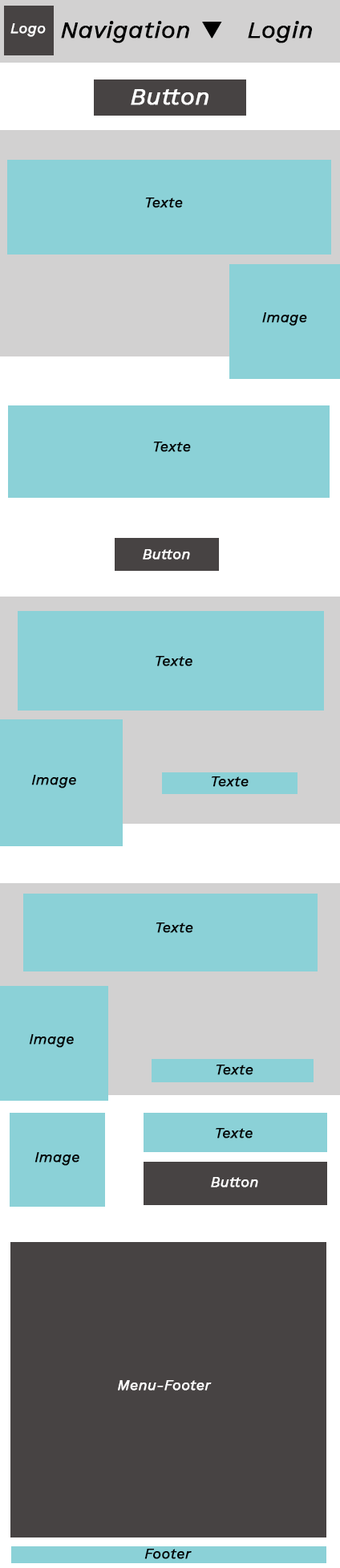
<style>
.page{position:relative;width:340px;height:1568px;background:#8bd1d7}
.page>*{position:absolute;margin:0}
.t1{font:14.5px "WorkSans-Italic";color:#ffffff;font-weight:bold}
.t2{font:24.1px "WorkSans-Italic";color:#000000;font-weight:bold}
.t3{font:24.1px "WorkSans-Italic";color:#ffffff;font-weight:bold}
.t4{font:14.5px "WorkSans-Italic";color:#000000;font-weight:bold}
</style>
<div class="page">
<p class="t1" style="left:10px;top:23px;width:36px;height:14px">Logo</p>
<p class="t2" style="left:61px;top:21px;width:161px;height:22px">Navigation ▼</p>
<p class="t2" style="left:248px;top:21px;width:64px;height:22px">Login</p>
<p class="t3" style="left:131px;top:89px;width:78px;height:16px">Button</p>
<p class="t4" style="left:145px;top:198px;width:38px;height:10px">Texte</p>
<p class="t4" style="left:263px;top:312px;width:44px;height:14px">Image</p>
<p class="t4" style="left:153px;top:442px;width:38px;height:10px">Texte</p>
<p class="t1" style="left:143px;top:549px;width:47px;height:11px">Button</p>
<p class="t4" style="left:156px;top:656px;width:37px;height:10px">Texte</p>
<p class="t4" style="left:31px;top:775px;width:45px;height:13px">Image</p>
<p class="t4" style="left:212px;top:776px;width:37px;height:11px">Texte</p>
<p class="t4" style="left:156px;top:922px;width:37px;height:11px">Texte</p>
<p class="t4" style="left:29px;top:1034px;width:45px;height:14px">Image</p>
<p class="t4" style="left:216px;top:1065px;width:38px;height:10px">Texte</p>
<p class="t4" style="left:216px;top:1128px;width:37px;height:10px">Texte</p>
<p class="t4" style="left:35px;top:1152px;width:44px;height:14px">Image</p>
<p class="t1" style="left:211px;top:1177px;width:48px;height:10px">Button</p>
<p class="t1" style="left:118px;top:1380px;width:94px;height:11px">Menu-Footer</p>
<p class="t4" style="left:145px;top:1549px;width:47px;height:10px">Footer</p>
</div>
